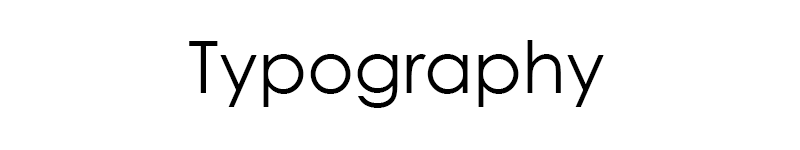
<style>
.page{position:relative;width:800px;height:150px;background:#ffffff}
.page>*{position:absolute;margin:0}
.t1{font:72px "CenturyGothic";color:#000000}
</style>
<div class="page">
<p class="t1" style="left:189px;top:40px;width:415px;height:68px">Typography</p>
</div>
